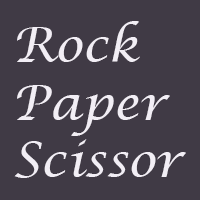
<style>
.page{position:relative;width:200px;height:200px;background:#403a45}
.page>*{position:absolute;margin:0}
.t1{font:48px "LucidaCalligraphy-Italic";color:#f2eef5}
</style>
<div class="page">
<p class="t1" style="left:14px;top:21px;width:172px;height:157px">Rock<br>Paper<br>Scissor</p>
</div>
